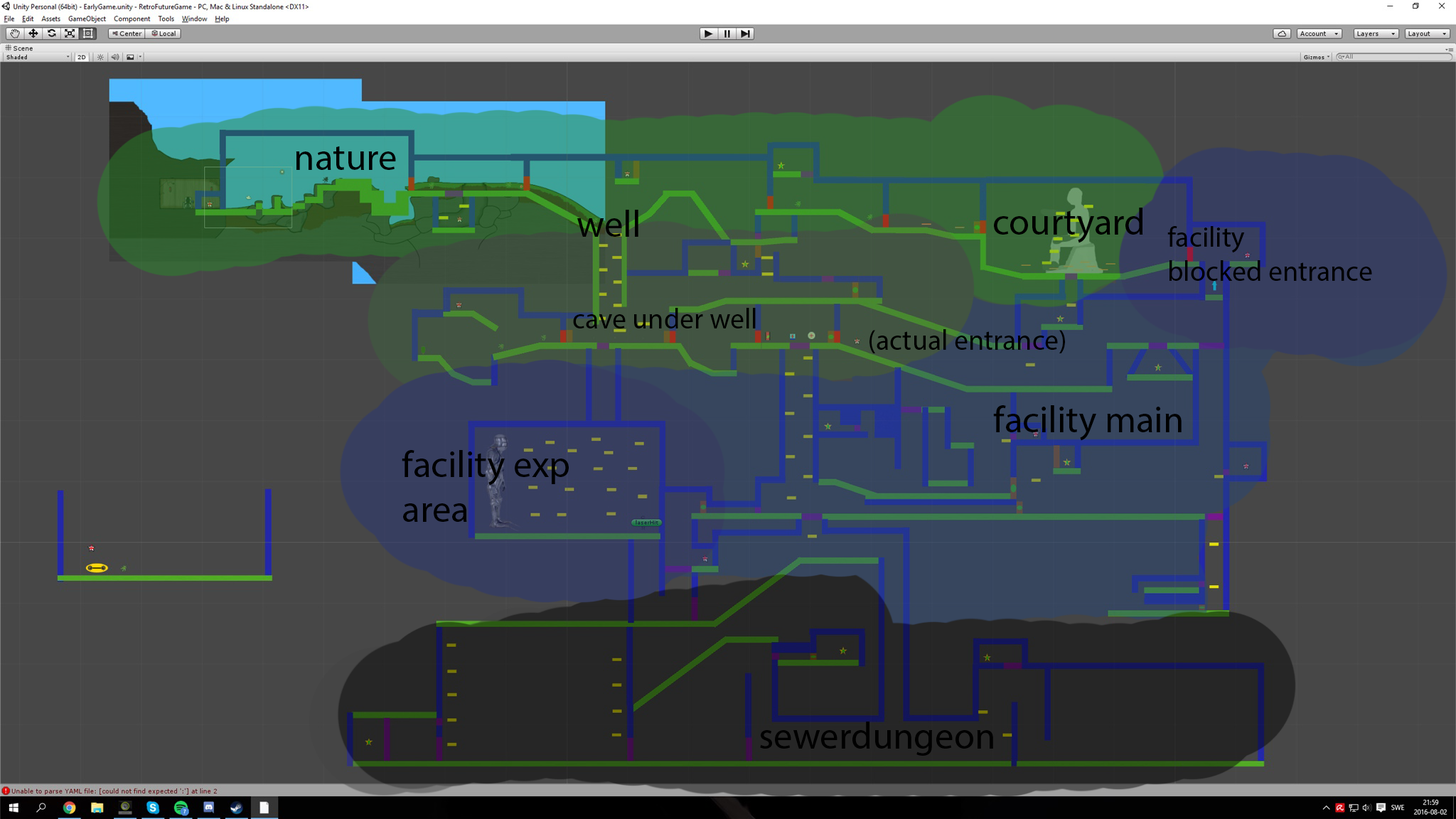
<style>
.page{position:relative;width:1456px;height:819px;background:#474747}
.page>*{position:absolute;margin:0}
.t1{font:37.7px "MyriadPro-Regular";color:#000000}
.t2{font:28.4px "MyriadPro-Regular";color:#000000}
</style>
<div class="page">
<p class="t1" style="left:296px;top:146px;width:100px;height:24px">nature</p>
<p class="t1" style="left:577px;top:210px;width:61px;height:27px">well</p>
<p class="t1" style="left:994px;top:208px;width:149px;height:35px">courtyard</p>
<p class="t2" style="left:1167px;top:226px;width:205px;height:55px">facility<br>blocked entrance</p>
<p class="t2" style="left:573px;top:308px;width:183px;height:20px">cave under well</p>
<p class="t2" style="left:869px;top:329px;width:196px;height:24px">(actual entrance)</p>
<p class="t1" style="left:993px;top:405px;width:189px;height:36px">facility main</p>
<p class="t1" style="left:402px;top:450px;width:167px;height:72px">facility exp<br>area</p>
<p class="t1" style="left:760px;top:722px;width:233px;height:34px">sewerdungeon</p>
</div>
